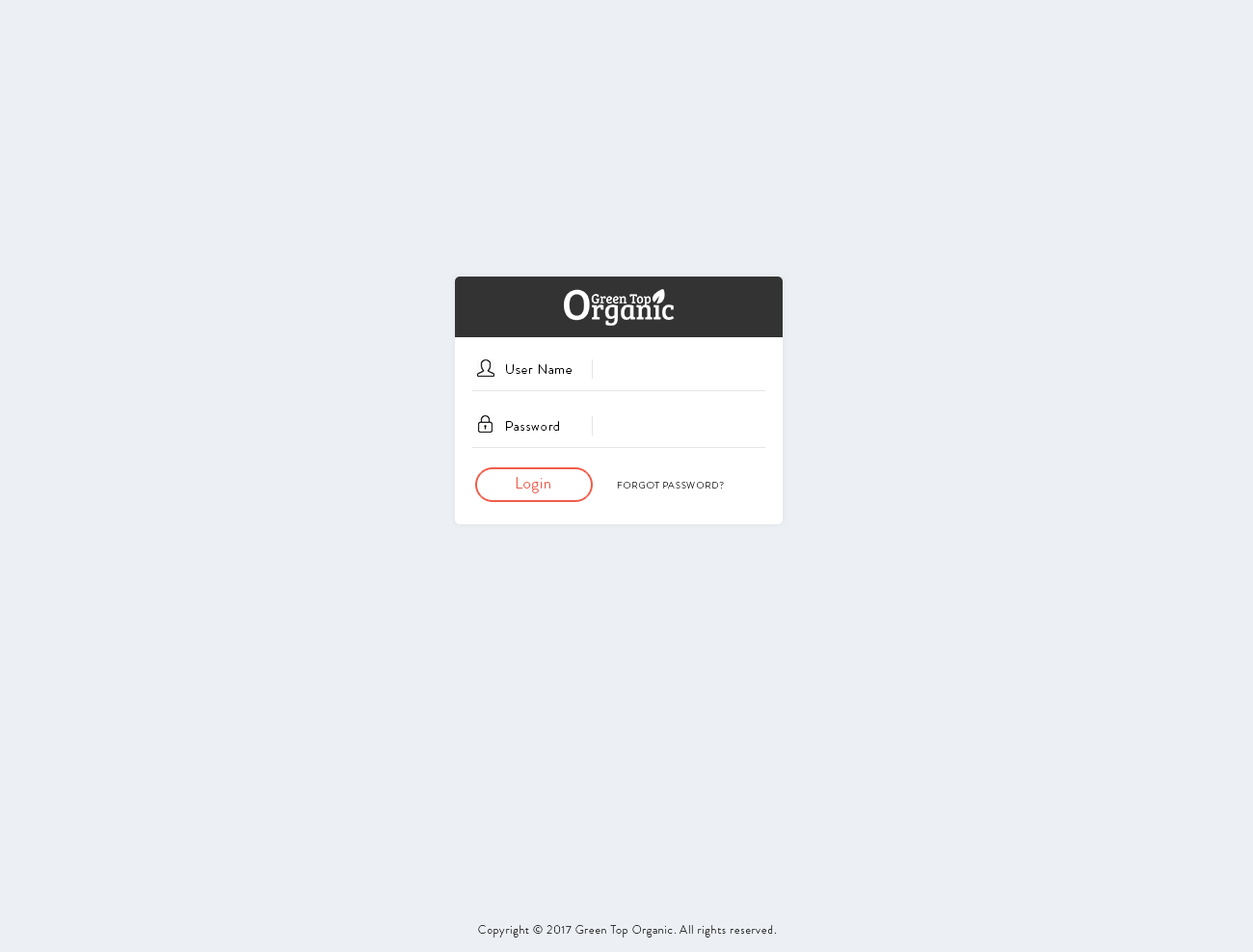
<style>
.page{position:relative;width:1253px;height:952px;background:#ecf0f5}
.page>*{position:absolute;margin:0}
.t1{font:13.5px "BrandonGrotesque-Light";letter-spacing:0.06em;color:#000000}
.t2{font:15.4px "BrandonGrotesque-Light";letter-spacing:0.06em;color:#f05c49}
.t3{font:9.6px "BrandonGrotesque-Light";letter-spacing:0.06em;color:#333333;text-transform:uppercase}
.t4{font:11.6px "BrandonGrotesque-Light";letter-spacing:0.06em;color:#333333}
</style>
<div class="page">
<p class="t1" style="left:506px;top:364px;width:66px;height:10px">User Name</p>
<p class="t1" style="left:506px;top:421px;width:53px;height:10px">Password</p>
<p class="t2" style="left:515px;top:477px;width:35px;height:16px">Login</p>
<p class="t3" style="left:617px;top:482px;width:107px;height:7px">Forgot Password?</p>
<p class="t4" style="left:478px;top:925px;width:299px;height:13px">Copyright © 2017 Green Top Organic. All rights reserved.</p>
</div>
